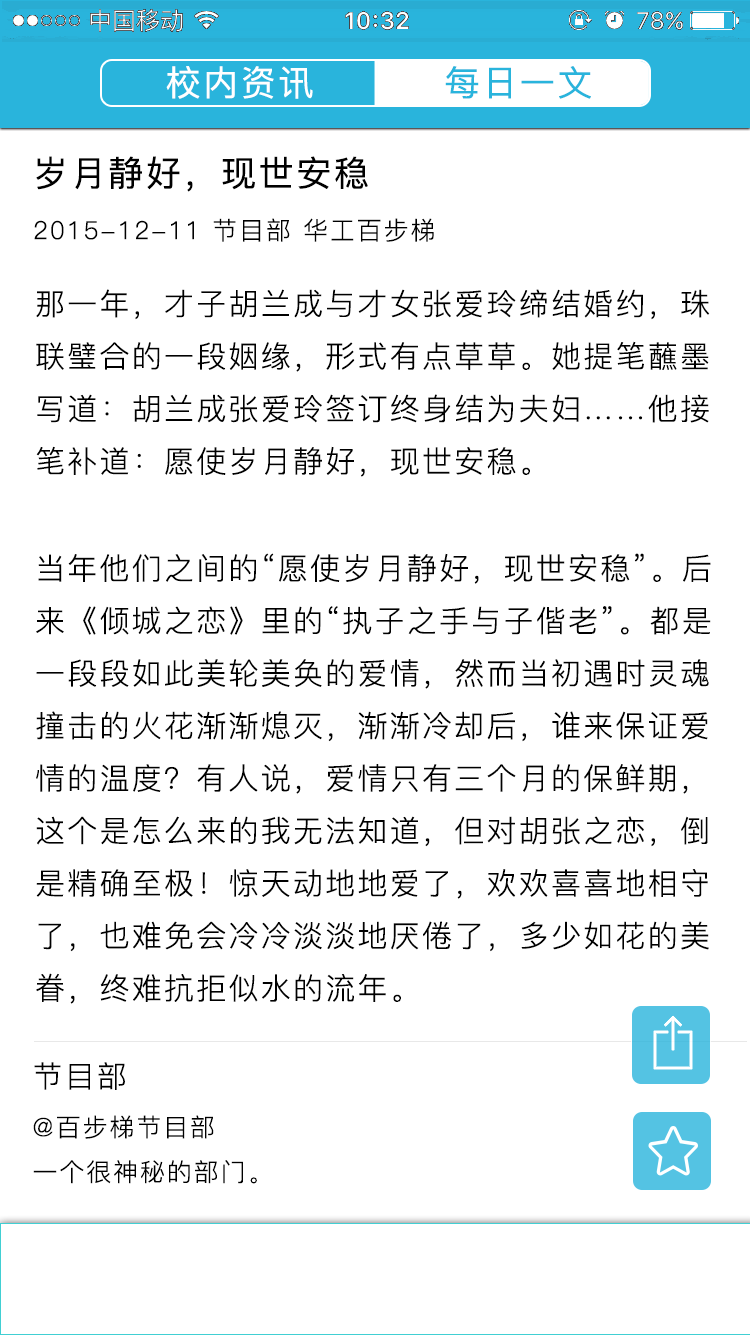
<style>
.page{position:relative;width:750px;height:1335px;background:#ffffff}
.page>*{position:absolute;margin:0}
.t1{font:25px "PingFang-SC-Regular";letter-spacing:0.075em;color:#000000}
.t2{font:35px "PingFang-SC-Medium";letter-spacing:0.075em;color:#000000}
.t3{font:30px "PingFang-SC-Regular";letter-spacing:0.075em;color:#000000}
</style>
<div class="page">
<p class="t1" style="left:34px;top:156px;width:400px;height:86px"><span class="t2">岁月静好，现世安稳<br></span>2015-12-11 节目部 华工百步梯</p>
<p class="t3" style="left:36px;top:289px;width:675px;height:715px">那一年，才子胡兰成与才女张爱玲缔结婚约，珠联璧合的一段姻缘，形式有点草草。她提笔蘸墨写道：胡兰成张爱玲签订终身结为夫妇……他接笔补道：愿使岁月静好，现世安稳。<br><br>当年他们之间的“愿使岁月静好，现世安稳”。后来《倾城之恋》里的“执子之手与子偕老”。都是一段段如此美轮美奂的爱情，然而当初遇时灵魂撞击的火花渐渐熄灭，渐渐冷却后，谁来保证爱情的温度？有人说，爱情只有三个月的保鲜期，这个是怎么来的我无法知道，但对胡张之恋，倒是精确至极！惊天动地地爱了，欢欢喜喜地相守了，也难免会冷冷淡淡地厌倦了，多少如花的美眷，终难抗拒似水的流年。</p>
<p class="t1" style="left:33px;top:1062px;width:224px;height:122px"><span class="t3">节目部<br></span>@百步梯节目部<br>一个很神秘的部门。</p>
</div>
